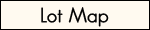
<style>
.page{position:relative;width:150px;height:30px;background:#fffaf0}
.page>*{position:absolute;margin:0}
.t1{font:20px "GeosansLight";color:#000000;font-weight:bold}
</style>
<div class="page">
<p class="t1" style="left:41px;top:7px;width:68px;height:20px">Lot Map</p>
</div>
